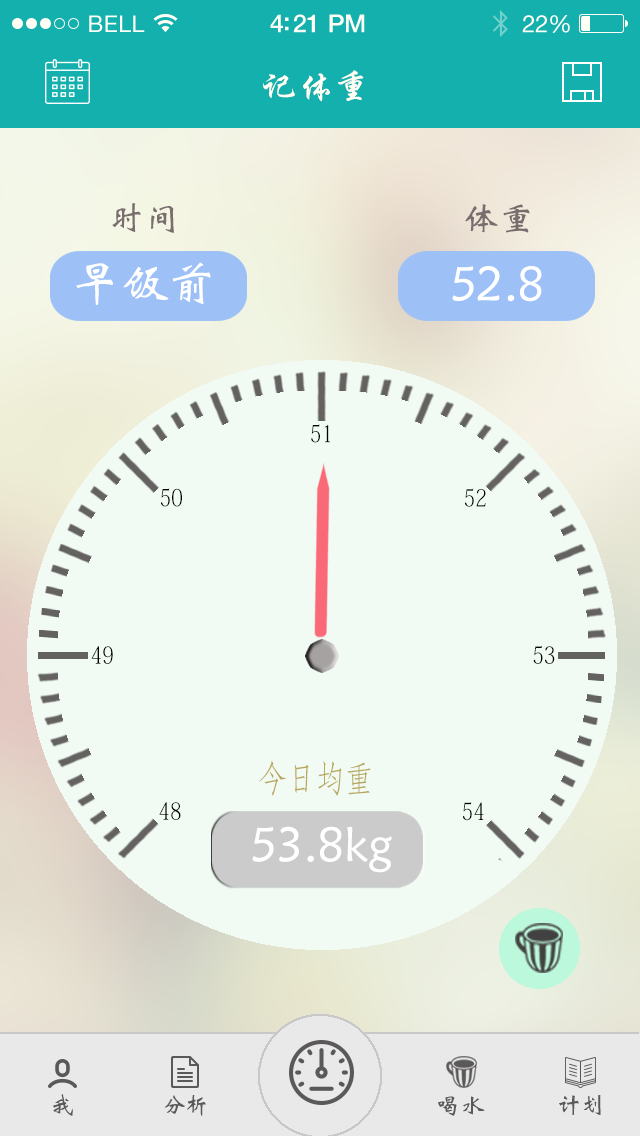
<style>
.page{position:relative;width:640px;height:1136px;background:#f1fbf3}
.page>*{position:absolute;margin:0}
.t1{font:23px "HelveticaNeue";letter-spacing:0.02em;color:#ffffff}
.t2{font:25px "HelveticaNeue-Medium";letter-spacing:-0.02em;color:#ffffff}
.t3{font:24px "HelveticaNeue";letter-spacing:-0.02em;color:#ffffff}
.t4{font:36px "STXingkai";color:#ffffff}
.t5{font:36px "STXinwei";color:#7e7e7c}
.t6{font:48px "STXinwei";color:#ffffff}
.t7{font:24px "AdobeFangsongStd-Regular";color:#000000;scale:0.8 1}
.t8{font:36px "AdobeFangsongStd-Regular";color:#b8a85d;scale:0.8 1}
.t9{font:24px "STXinwei";color:#5b5858}
.t10{font:24px "STXinwei";color:#646464}
</style>
<div class="page">
<p class="t1" style="left:89px;top:15px;width:56px;height:17px">BELL</p>
<p class="t2" style="left:270px;top:14px;width:95px;height:19px">4:21 PM</p>
<p class="t3" style="left:522px;top:15px;width:48px;height:18px">22%</p>
<p class="t4" style="left:263px;top:70px;width:101px;height:32px">记体重</p>
<p class="t5" style="left:112px;top:203px;width:62px;height:30px">时间</p>
<p class="t5" style="left:465px;top:204px;width:65px;height:29px">体重</p>
<p class="t6" style="left:76px;top:262px;width:135px;height:43px">早饭前</p>
<p class="t6" style="left:452px;top:266px;width:90px;height:36px">52.8</p>
<p class="t7" style="left:311px;top:424px;width:19px;height:19px">51</p>
<p class="t7" style="left:161px;top:488px;width:21px;height:19px">50</p>
<p class="t7" style="left:465px;top:488px;width:21px;height:19px">52</p>
<p class="t7" style="left:91px;top:646px;width:22px;height:18px">49</p>
<p class="t7" style="left:533px;top:646px;width:22px;height:18px">53</p>
<p class="t8" style="left:259px;top:760px;width:112px;height:36px">今日均重</p>
<p class="t7" style="left:159px;top:802px;width:22px;height:18px">48</p>
<p class="t7" style="left:463px;top:802px;width:21px;height:19px">54</p>
<p class="t6" style="left:252px;top:826px;width:140px;height:47px">53.8kg</p>
<p class="t9" style="left:53px;top:1094px;width:20px;height:22px">我</p>
<p class="t10" style="left:165px;top:1095px;width:41px;height:21px">分析</p>
<p class="t9" style="left:438px;top:1096px;width:47px;height:20px">喝水</p>
<p class="t9" style="left:559px;top:1095px;width:42px;height:20px">计划</p>
</div>
